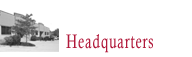
<style>
.page{position:relative;width:192px;height:57px;background:#ffffff}
.page>*{position:absolute;margin:0}
.t1{font:19.6px "CalistoMT";letter-spacing:0.05em;color:#b11a3b;scale:0.71 1}
</style>
<div class="page">
<p class="t1" style="left:66px;top:34px;width:87px;height:19px">Headquarters</p>
</div>
